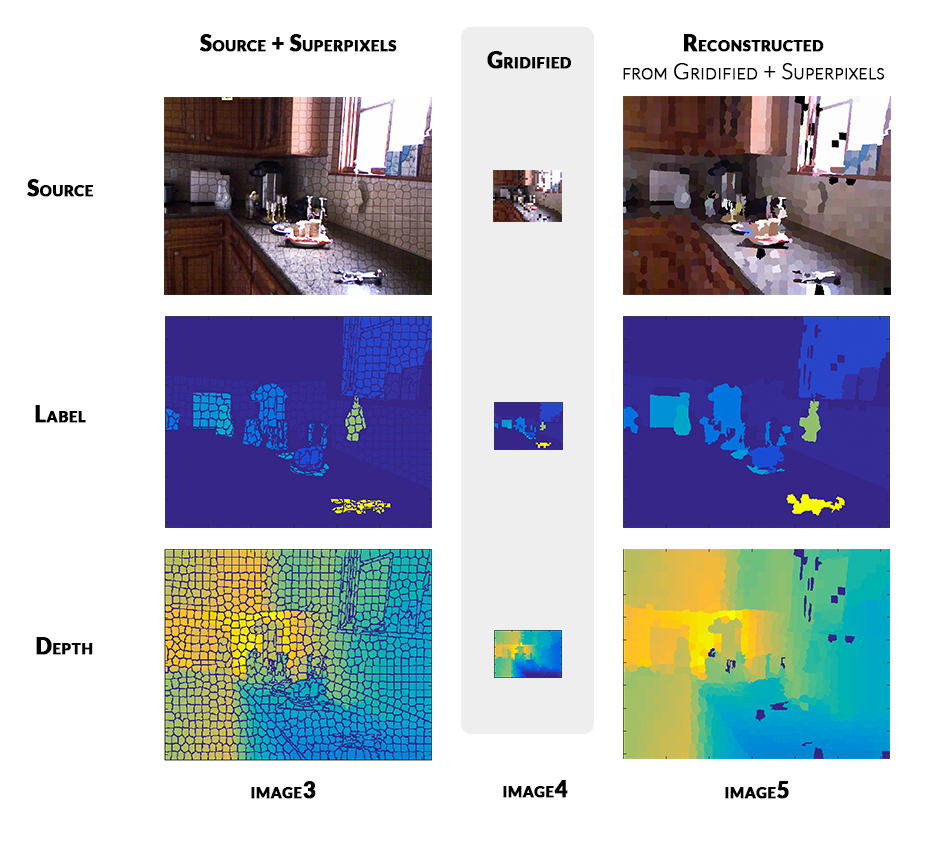
<style>
.page{position:relative;width:947px;height:855px;background:#ffffff}
.page>*{position:absolute;margin:0}
.t1{font:22px "Lato-Black";color:#000000;font-variant:small-caps;font-weight:bold}
.t2{font:22px/28px "Lato-Light";color:#000000;font-variant:small-caps;font-weight:bold}
.t3{font:22px/28px "Lato-Black";color:#000000;font-variant:small-caps;font-weight:bold}
</style>
<div class="page">
<p class="t1" style="left:200px;top:34px;width:197px;height:18px">Source + Superpixels</p>
<p class="t2" style="left:623px;top:34px;width:262px;height:46px;text-align:center"><span class="t3">Reconstructed<br></span>from Gridified + Superpixels</p>
<p class="t1" style="left:487px;top:51px;width:84px;height:18px">Gridified</p>
<p class="t1" style="left:27px;top:179px;width:66px;height:18px">Source</p>
<p class="t1" style="left:35px;top:405px;width:51px;height:18px">Label</p>
<p class="t1" style="left:36px;top:637px;width:57px;height:18px">Depth</p>
<p class="t1" style="left:251px;top:781px;width:65px;height:18px">image3</p>
<p class="t1" style="left:503px;top:780px;width:65px;height:18px">image4</p>
<p class="t1" style="left:725px;top:781px;width:64px;height:18px">image5</p>
</div>
